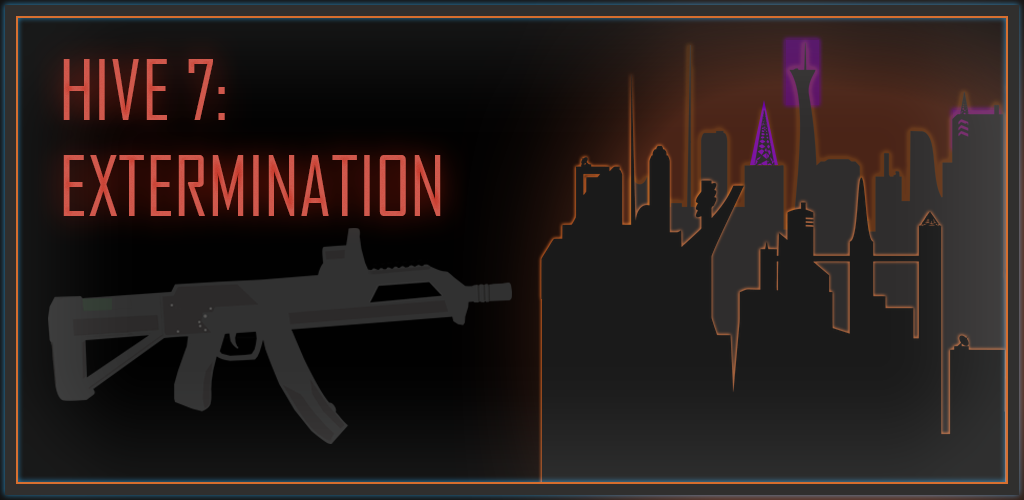
<style>
.page{position:relative;width:1024px;height:500px}
.page>*{position:absolute;margin:0}
.t1{font:80px "AgencyFB-Reg";color:#cf574b}
</style>
<div class="page">
<p class="t1" style="left:63px;top:59px;width:378px;height:157px">HIVE 7:<br>EXTERMINATION</p>
</div>
